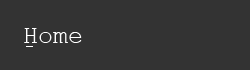
<style>
.page{position:relative;width:250px;height:70px;background:#333333}
.page>*{position:absolute;margin:0}
.t1{font:25px "CourierNewPSMT";color:#ffffff}
</style>
<div class="page">
<p class="t1" style="left:24px;top:28px;width:58px;height:15px">Home</p>
</div>
